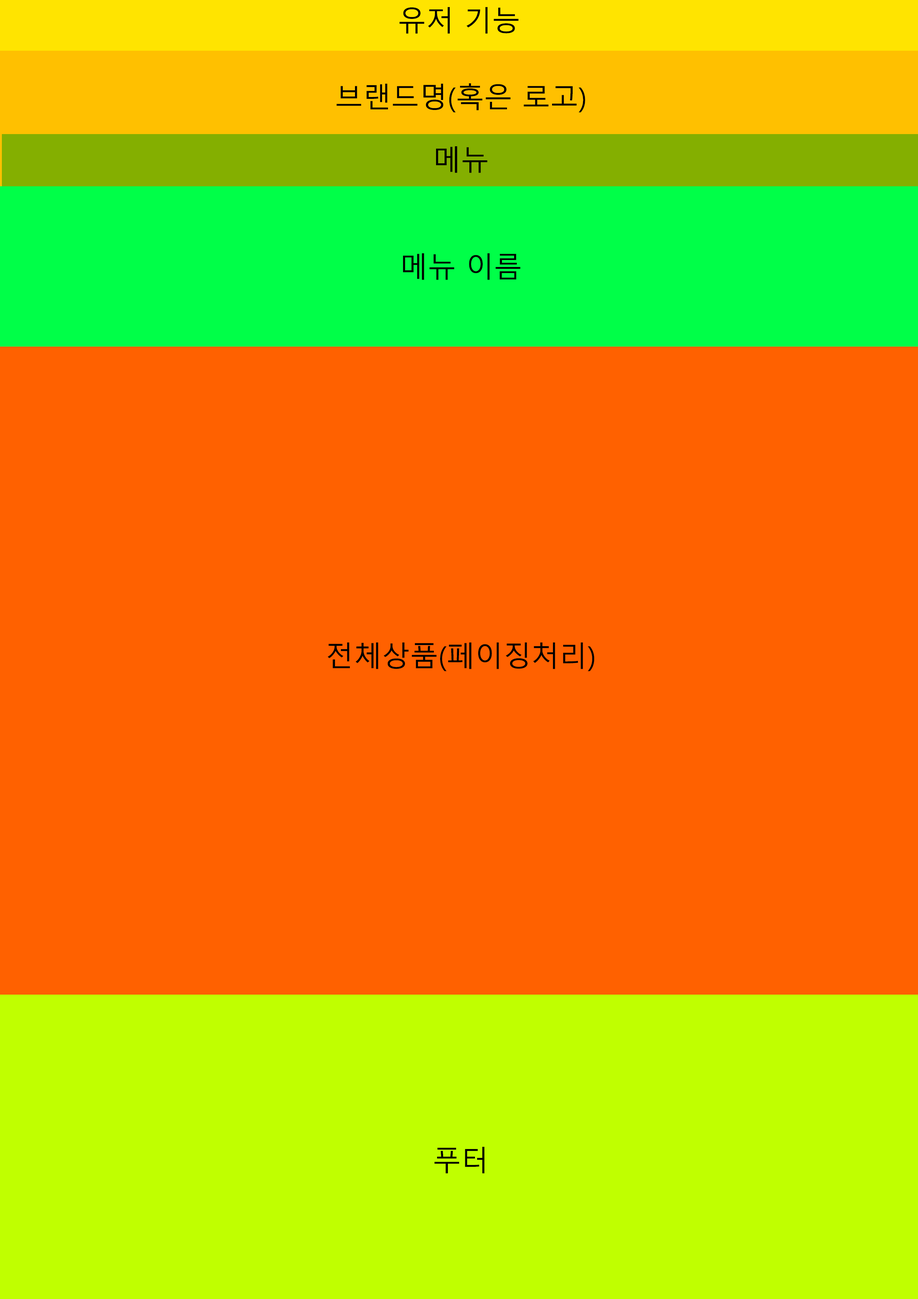
<style>
.page{position:relative;width:918px;height:1299px;background:#ff6100}
.page>*{position:absolute;margin:0}
.t1{font:28.1px "MalgunGothic";color:#000000}
</style>
<div class="page">
<p class="t1" style="left:399px;top:7px;width:120px;height:27px">유저 기능</p>
<p class="t1" style="left:337px;top:83px;width:248px;height:30px">브랜드명(혹은 로고)</p>
<p class="t1" style="left:436px;top:146px;width:52px;height:27px">메뉴</p>
<p class="t1" style="left:403px;top:253px;width:118px;height:27px">메뉴 이름</p>
<p class="t1" style="left:328px;top:642px;width:267px;height:29px">전체상품(페이징처리)</p>
<p class="t1" style="left:434px;top:1147px;width:51px;height:26px">푸터</p>
</div>
